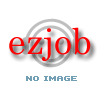
<style>
.page{position:relative;width:100px;height:100px;background:#ffffff}
.page>*{position:absolute;margin:0}
.t1{font:36px "Century";color:#ff0000}
</style>
<div class="page">
<p class="t1" style="left:9px;top:27px;width:82px;height:34px">ezjob</p>
</div>
